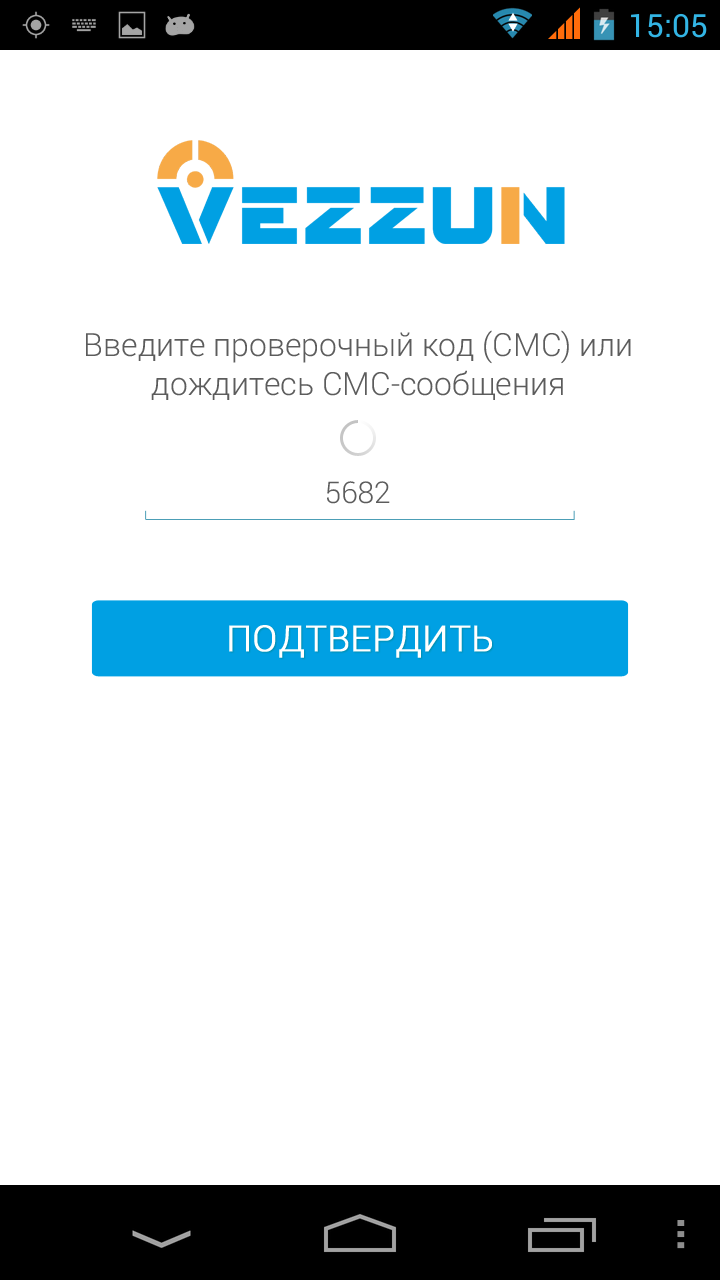
<style>
.page{position:relative;width:720px;height:1280px;background:#ffffff}
.page>*{position:absolute;margin:0}
.t1{font:32px "Roboto-Light";color:#5c5c5c}
.t2{font:30px "Roboto-Light";color:#5c5c5c}
.t3{font:36px "Roboto-Light";color:#ffffff;text-transform:uppercase;font-weight:bold}
</style>
<div class="page">
<p class="t1" style="left:86px;top:330px;width:545px;height:70px;text-align:center">Введите проверочный код (СМС) или дождитесь СМС-сообщения</p>
<p class="t2" style="left:327px;top:481px;width:63px;height:23px">5682</p>
<p class="t3" style="left:229px;top:625px;width:263px;height:33px">ПОДТВЕРДИТЬ</p>
</div>
